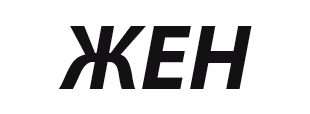
<style>
.page{position:relative;width:310px;height:114px;background:#ffffff}
.page>*{position:absolute;margin:0}
.t1{font:93px "MyriadPro-BoldIt";color:#141114}
</style>
<div class="page">
<p class="t1" style="left:58px;top:26px;width:194px;height:63px">ЖЕН</p>
</div>
